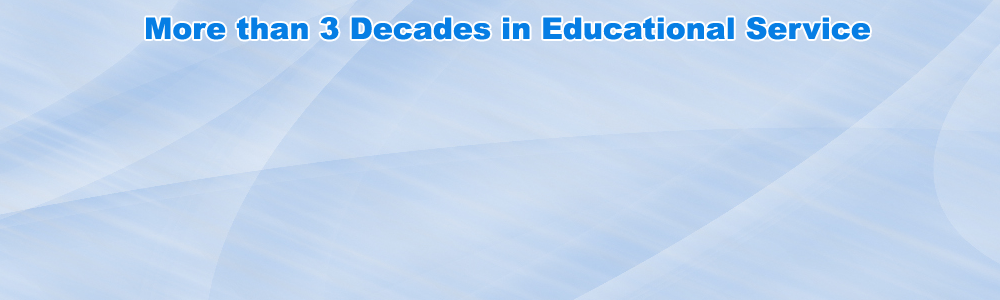
<style>
.page{position:relative;width:1000px;height:300px}
.page>*{position:absolute;margin:0}
.t1{font:30px "Arial-Black";color:#067ee4}
</style>
<div class="page">
<p class="t1" style="left:146px;top:17px;width:724px;height:23px">More than 3 Decades in Educational Service</p>
</div>
